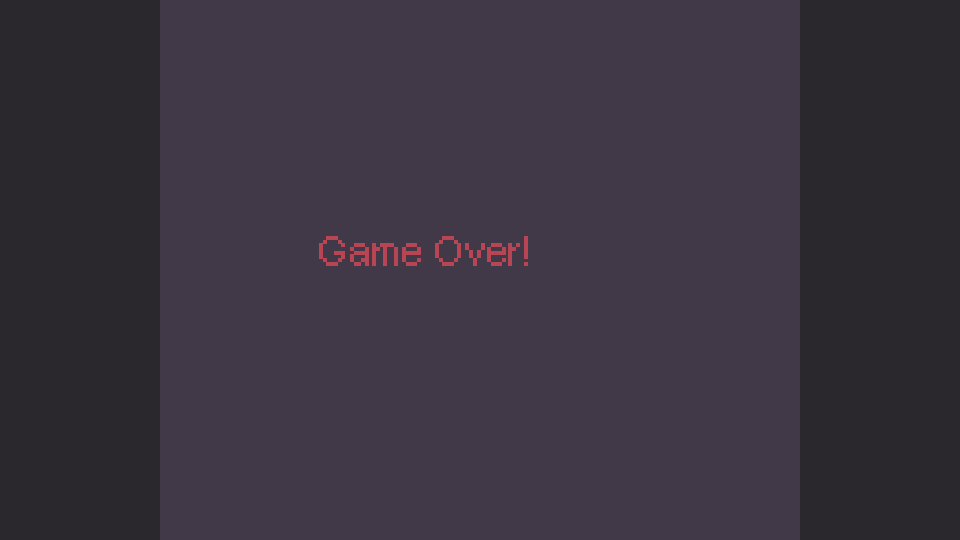
<style>
.page{position:relative;width:960px;height:540px;background:#413848}
.page>*{position:absolute;margin:0}
.t1{font:30px "PixelArial11";color:#b74554}
</style>
<div class="page">
<p class="t1" style="left:319px;top:236px;width:209px;height:30px">Game Over!</p>
</div>
